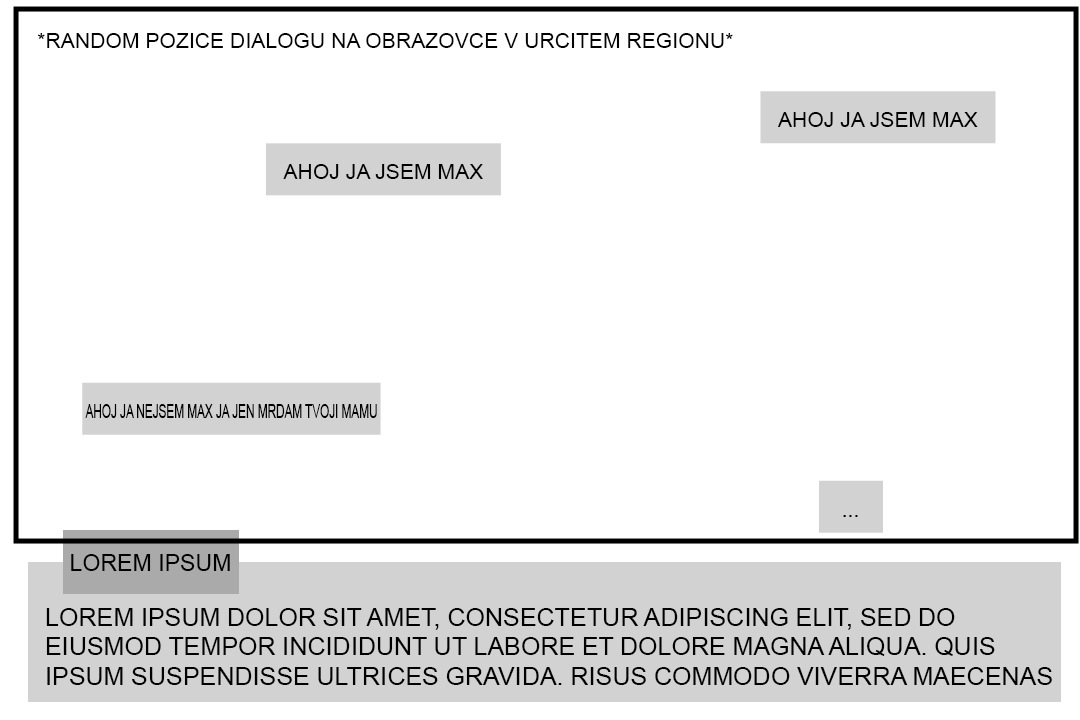
<style>
.page{position:relative;width:1080px;height:720px;background:#ffffff}
.page>*{position:absolute;margin:0}
.t1{font:21.2px "ArialMT";color:#000000;text-transform:uppercase}
.t2{font:19.4px "ArialMT";color:#000000;text-transform:uppercase;scale:0.6 1}
.t3{font:23.1px "ArialMT";color:#000000;text-transform:uppercase}
.t4{font:24.7px "ArialMT";color:#000000;text-transform:uppercase}
</style>
<div class="page">
<p class="t1" style="left:38px;top:33px;width:695px;height:15px">*random pozice dialogu na obrazovce v urcitem regionu*</p>
<p class="t1" style="left:778px;top:112px;width:200px;height:15px">Ahoj ja jsem max</p>
<p class="t1" style="left:283px;top:164px;width:200px;height:15px">Ahoj ja jsem max</p>
<p class="t2" style="left:85px;top:404px;width:292px;height:14px">Ahoj ja nejsem max ja jen mrdam tvoji mamu</p>
<p class="t1" style="left:843px;top:515px;width:15px;height:2px">...</p>
<p class="t3" style="left:71px;top:554px;width:159px;height:17px">Lorem Ipsum</p>
<p class="t4" style="left:46px;top:608px;width:1006px;height:77px">Lorem ipsum dolor sit amet, consectetur adipiscing elit, sed do eiusmod tempor incididunt ut labore et dolore magna aliqua. Quis ipsum suspendisse ultrices gravida. Risus commodo viverra maecenas accumsan lacus vel facilisis.</p>
</div>
